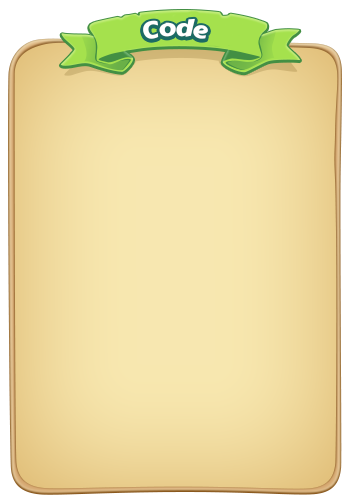
<style>
.page{position:relative;width:350px;height:500px}
.page>*{position:absolute;margin:0}
.t1{font:23.3px "CarterOne";letter-spacing:-0.02em;color:#ffffff}
</style>
<div class="page">
<p class="t1" style="left:143px;top:18px;width:65px;height:21px">Code</p>
</div>
